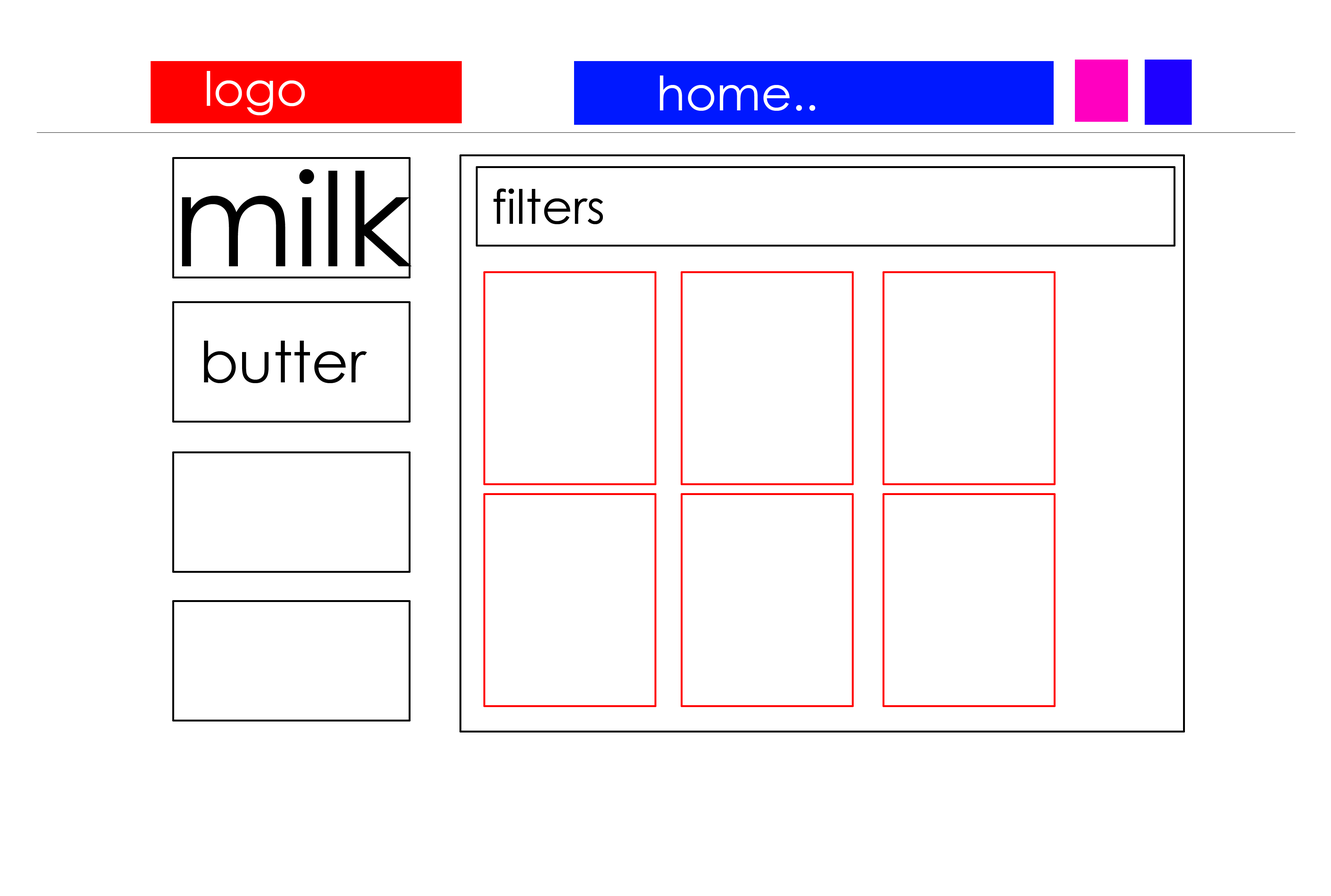
<style>
.page{position:relative;width:1331px;height:896px;background:#ffffff}
.page>*{position:absolute;margin:0}
.t1{font:47.4px "CenturyGothic";color:#ffffff}
.t2{font:129.6px "CenturyGothic";color:#000000}
.t3{font:47.4px "CenturyGothic";color:#000000}
.t4{font:56.9px "CenturyGothic";color:#000000}
</style>
<div class="page">
<p class="t1" style="left:207px;top:71px;width:98px;height:44px">logo</p>
<p class="t1" style="left:660px;top:75px;width:155px;height:36px">home..</p>
<p class="t2" style="left:182px;top:169px;width:230px;height:97px">milk</p>
<p class="t3" style="left:493px;top:189px;width:110px;height:35px">filters</p>
<p class="t4" style="left:204px;top:341px;width:163px;height:42px">butter</p>
</div>
